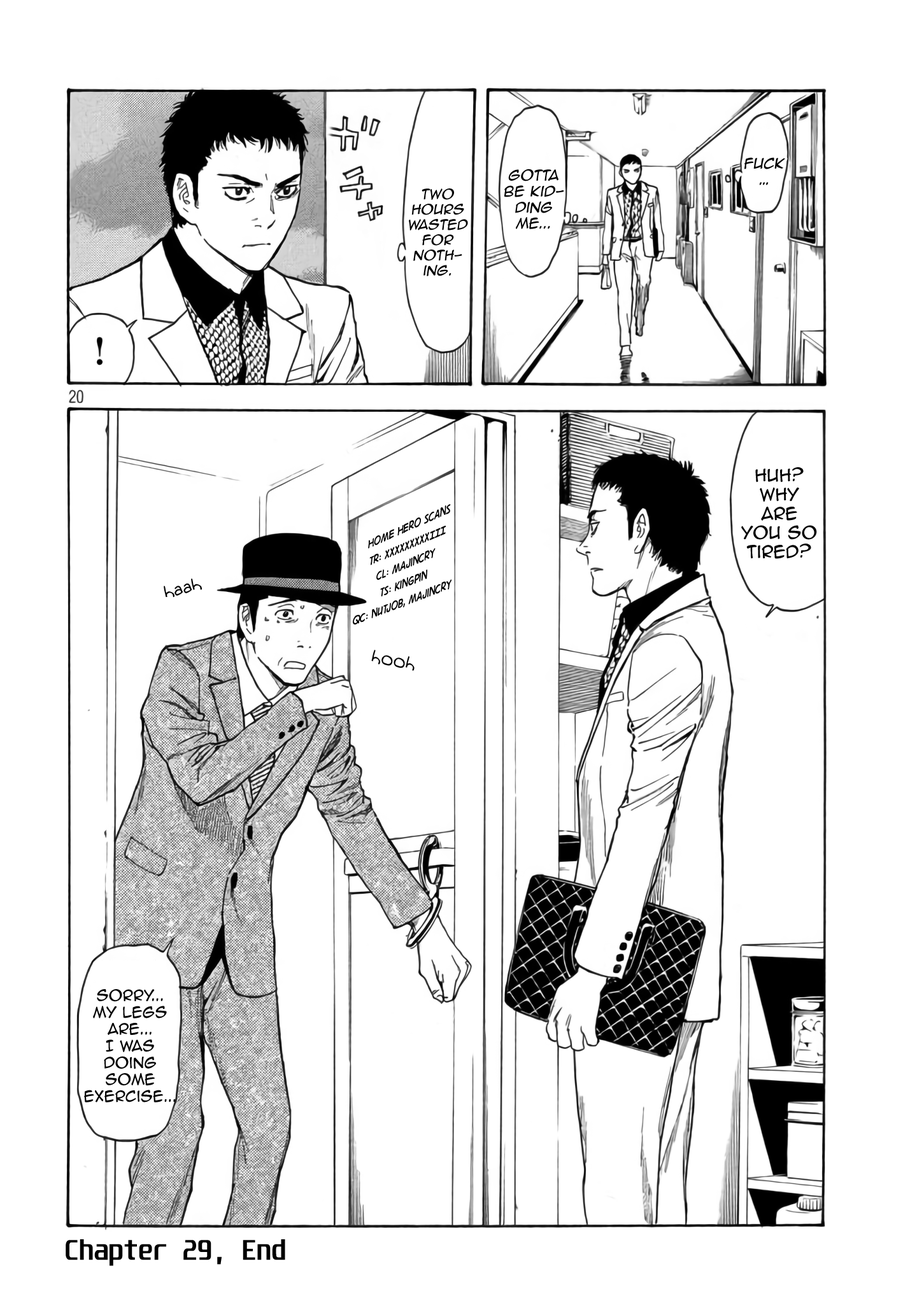
<style>
.page{position:relative;width:917px;height:1301px;background:#ffffff}
.page>*{position:absolute;margin:0}
.t1{font:13.4px "AnimeAce2.0BB";color:#030303;font-style:italic}
.t2{font:12.7px "AnimeAce2.0BB";color:#030303;font-style:italic}
.t3{font:15.9px "AnimeAce2.0BB";color:#030303}
.t4{font:16px "DigitalStrip.BB";color:#000000;scale:0.76 1}
.t5{font:17.8px "Augie";color:#030303}
.t6{font:14px "AnimeAce2.0BB";color:#030303}
.t7{font:24.2px "Unispace-Bold";color:#000000}
</style>
<div class="page">
<p class="t1" style="left:744px;top:157px;width:41px;height:28px;text-align:center">Fuck<br>…</p>
<p class="t1" style="left:504px;top:169px;width:60px;height:60px;text-align:center">gotta be kidding me...</p>
<p class="t2" style="left:409px;top:188px;width:59px;height:88px;text-align:center">two hours wasted for nothing.</p>
<p class="t3" style="left:741px;top:467px;width:76px;height:92px;text-align:center">Huh? Why are you so tired?</p>
<p class="t4" style="left:353px;top:504px;width:98px;height:121px;text-align:center;rotate:-20deg">Home Hero Scans<br>Tr: XXXXXXXXXIII<br>CL: Majincry<br>TS: KingPin<br>QC: nutjob, majincry</p>
<p class="t5" style="left:164px;top:579px;width:38px;height:19px;rotate:-15deg">haah</p>
<p class="t5" style="left:371px;top:649px;width:43px;height:22px;rotate:11deg">hooh</p>
<p class="t6" style="left:84px;top:989px;width:92px;height:113px;text-align:center">Sorry...<br>My legs are...<br>I was doing some <br>exercise...</p>
<p class="t7" style="left:66px;top:1239px;width:219px;height:27px">Chapter 29, End</p>
</div>
